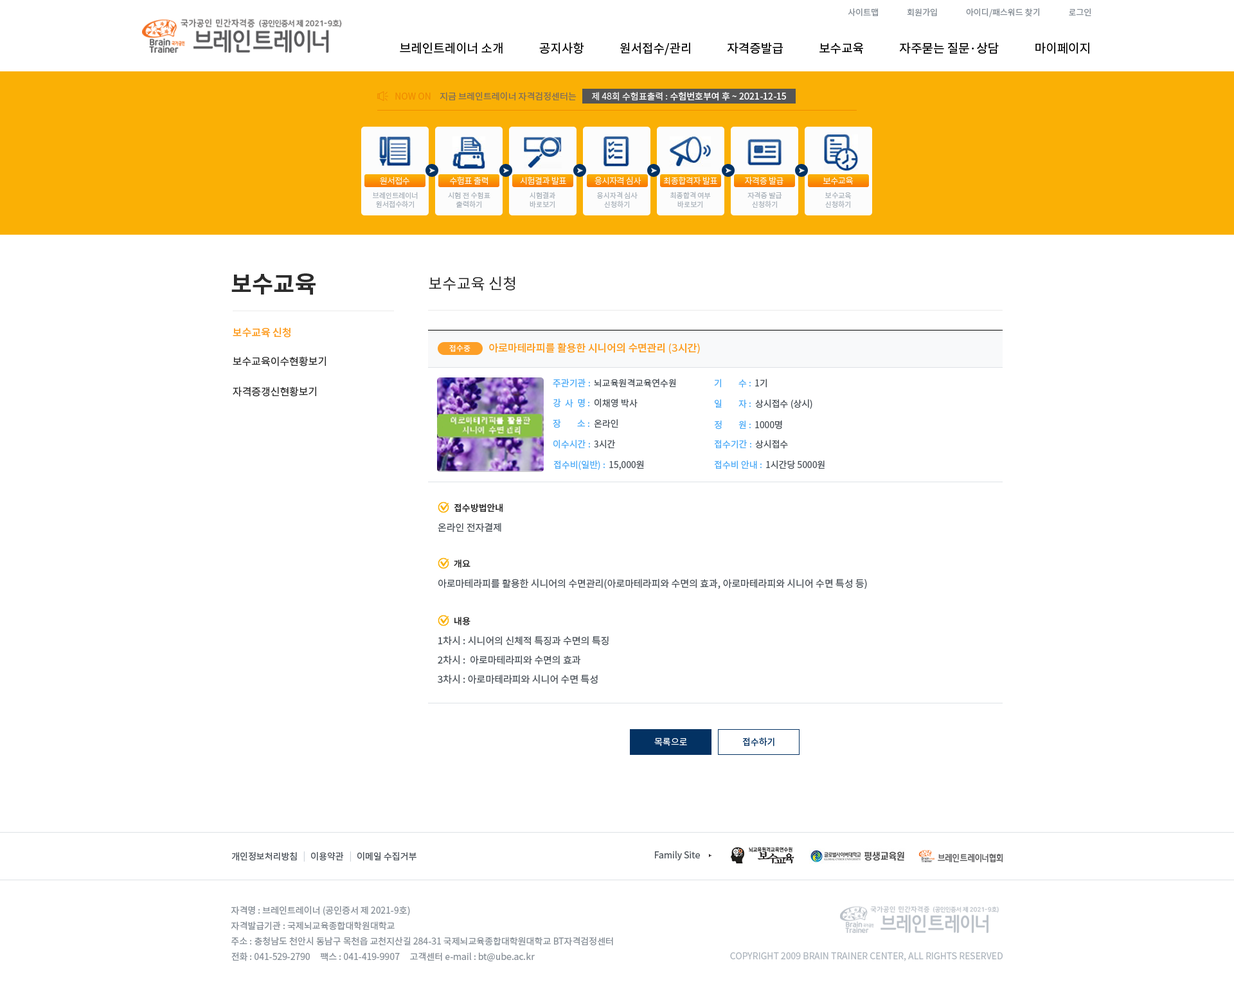
<style>
.page{position:relative;width:1234px;height:987px;background:#ffffff}
.page>*{position:absolute;margin:0}
.t1{font:8.4px "NotoSansCJKkr-Regular";letter-spacing:0.001em;color:#868e96}
.t2{font:12.2px "NotoSansCJKkr-Regular";color:#000000}
.t3{font:9px "NotoSansCJKkr-Regular";color:#f08c00}
.t4{font:9px "NotoSansCJKkr-Regular";color:#7c6d5d}
.t5{font:9px "NotoSansCJKkr-Medium";color:#f8f8f8}
.t6{font:9px "NotoSansCJKkr-Regular";color:#f8f8f8}
.t7{font:8.4px "NotoSansCJKkr-Light";letter-spacing:-0.025em;color:#fcfcfc}
.t8{font:7.1px/9px "NotoSansCJKkr-Regular";color:#adb5bd}
.t9{font:23.1px "NotoSansCJKkr-Bold";color:#2b2b2b}
.t10{font:15.4px "NotoSansCJKkr-Regular";color:#2b2b2b}
.t11{font:10.3px "NotoSansCJKkr-Medium";color:#fd9f27}
.t12{font:7.7px "NotoSansCJKkr-Regular";color:#ffffff}
.t13{font:10.3px "NotoSansCJKkr-Regular";color:#2b2b2b}
.t14{font:9px "NotoSansCJKkr-Regular";color:#4dabf7}
.t15{font:9px "NotoSansCJKkr-Regular";color:#495057}
.t16{font:9px "NotoSansCJKkr-Medium";color:#2b2b2b}
.t17{font:9.6px "NotoSansCJKkr-Regular";color:#495057}
.t18{font:9.6px/19.3px "NotoSansCJKkr-Regular";color:#495057}
.t19{font:9px "NotoSansCJKkr-Regular";color:#ffffff}
.t20{font:9px "NotoSansCJKkr-Regular";color:#033263}
.t21{font:9px "NotoSansCJKkr-Regular";color:#ced4da}
.t22{font:9px/15.4px "NotoSansCJKkr-Regular";color:#868e96}
.t23{font:9px "NotoSansCJKkr-Regular";color:#adb5bd}
</style>
<div class="page">
<p class="t1" style="left:848px;top:8px;width:244px;height:9px">사이트맵               회원가입               아이디/패스워드 찾기               로그인</p>
<p class="t2" style="left:400px;top:42px;width:690px;height:13px">브레인트레이너 소개             공지사항             원서접수/관리             자격증발급             보수교육             자주묻는 질문·상담             마이페이지</p>
<p class="t3" style="left:395px;top:93px;width:36px;height:7px">NOW ON</p>
<p class="t4" style="left:440px;top:92px;width:137px;height:9px">지금 브레인트레이너 자격검정센터는</p>
<p class="t5" style="left:592px;top:92px;width:194px;height:9px"><span class="t6">제 48회 수험표출력 : </span>수험번호부여 후 ~ 2021-12-15</p>
<p class="t7" style="left:380px;top:177px;width:30px;height:8px">원서접수</p>
<p class="t7" style="left:450px;top:176px;width:38px;height:9px">수험표 출력</p>
<p class="t7" style="left:520px;top:176px;width:46px;height:8px">시험결과 발표</p>
<p class="t7" style="left:595px;top:176px;width:47px;height:9px">응시자격 심사</p>
<p class="t7" style="left:663px;top:176px;width:54px;height:9px">최종합격자 발표</p>
<p class="t7" style="left:745px;top:176px;width:39px;height:9px">자격증 발급</p>
<p class="t7" style="left:823px;top:177px;width:30px;height:8px">보수교육</p>
<p class="t8" style="left:373px;top:192px;width:45px;height:16px;text-align:center">브레인트레이너<br>원서접수하기</p>
<p class="t8" style="left:448px;top:192px;width:43px;height:16px;text-align:center">시험 전 수험표<br>출력하기</p>
<p class="t8" style="left:530px;top:192px;width:25px;height:16px;text-align:center">시험결과<br>바로보기</p>
<p class="t8" style="left:597px;top:192px;width:41px;height:16px;text-align:center">응시자격 심사<br>신청하기</p>
<p class="t8" style="left:670px;top:192px;width:41px;height:16px;text-align:center">최종합격 여부<br>바로보기</p>
<p class="t8" style="left:748px;top:192px;width:34px;height:16px;text-align:center">자격증 발급<br>신청하기</p>
<p class="t8" style="left:825px;top:192px;width:27px;height:16px;text-align:center">보수교육<br>신청하기</p>
<p class="t9" style="left:231px;top:273px;width:85px;height:22px">보수교육</p>
<p class="t10" style="left:429px;top:276px;width:86px;height:15px">보수교육 신청</p>
<p class="t11" style="left:233px;top:327px;width:58px;height:11px">보수교육 신청</p>
<p class="t12" style="left:449px;top:345px;width:22px;height:7px">접수중</p>
<p class="t11" style="left:489px;top:343px;width:211px;height:11px">아로마테라피를 활용한 시니어의 수면관리 (3시간)</p>
<p class="t13" style="left:233px;top:356px;width:93px;height:10px">보수교육이수현황보기</p>
<p class="t13" style="left:233px;top:386px;width:83px;height:11px">자격증갱신현황보기</p>
<p class="t14" style="left:553px;top:379px;width:37px;height:9px">주관기관 :</p>
<p class="t15" style="left:594px;top:379px;width:82px;height:9px">뇌교육원격교육연수원</p>
<p class="t14" style="left:714px;top:379px;width:37px;height:9px">기        수 :</p>
<p class="t15" style="left:755px;top:379px;width:12px;height:9px">1기</p>
<p class="t14" style="left:554px;top:399px;width:36px;height:9px">강  사  명 :</p>
<p class="t15" style="left:595px;top:399px;width:43px;height:9px">이채영 박사</p>
<p class="t14" style="left:715px;top:399px;width:36px;height:9px">일        자 :</p>
<p class="t15" style="left:755px;top:399px;width:58px;height:10px">상시접수 (상시)</p>
<p class="t14" style="left:553px;top:419px;width:37px;height:9px">장        소 :</p>
<p class="t15" style="left:594px;top:419px;width:24px;height:9px">온라인</p>
<p class="t14" style="left:715px;top:420px;width:36px;height:9px">정        원 :</p>
<p class="t15" style="left:755px;top:420px;width:27px;height:9px">1000명</p>
<p class="t14" style="left:554px;top:440px;width:36px;height:9px">이수시간 :</p>
<p class="t15" style="left:594px;top:440px;width:21px;height:8px">3시간</p>
<p class="t14" style="left:714px;top:440px;width:38px;height:9px">접수기간 :</p>
<p class="t15" style="left:755px;top:440px;width:33px;height:9px">상시접수</p>
<p class="t14" style="left:554px;top:460px;width:51px;height:10px">접수비(일반) :</p>
<p class="t15" style="left:609px;top:460px;width:35px;height:10px">15,000원</p>
<p class="t14" style="left:714px;top:460px;width:48px;height:9px">접수비 안내 :</p>
<p class="t15" style="left:766px;top:460px;width:59px;height:9px">1시간당 5000원</p>
<p class="t16" style="left:455px;top:503px;width:48px;height:9px">접수방법안내</p>
<p class="t17" style="left:438px;top:523px;width:63px;height:9px">온라인 전자결제</p>
<p class="t16" style="left:454px;top:559px;width:17px;height:9px">개요</p>
<p class="t17" style="left:438px;top:579px;width:429px;height:10px">아로마테라피를 활용한 시니어의 수면관리(아로마테라피와 수면의 효과, 아로마테라피와 시니어 수면 특성 등)</p>
<p class="t16" style="left:455px;top:616px;width:16px;height:10px">내용</p>
<p class="t18" style="left:438px;top:636px;width:171px;height:48px">1차시 : 시니어의 신체적 특징과 수면의 특징<br>2차시 :  아로마테라피와 수면의 효과<br>3차시 : 아로마테라피와 시니어 수면 특성</p>
<p class="t19" style="left:654px;top:737px;width:33px;height:9px">목록으로</p>
<p class="t20" style="left:742px;top:737px;width:33px;height:9px">접수하기</p>
<p class="t15" style="left:231px;top:852px;width:66px;height:9px">개인정보처리방침</p>
<p class="t21" style="left:303px;top:851px;width:2px;height:10px">|</p>
<p class="t15" style="left:311px;top:852px;width:33px;height:9px">이용약관</p>
<p class="t21" style="left:350px;top:851px;width:1px;height:10px">|</p>
<p class="t15" style="left:357px;top:852px;width:60px;height:9px">이메일 수집거부</p>
<p class="t15" style="left:655px;top:851px;width:45px;height:9px">Family Site</p>
<p class="t22" style="left:231px;top:906px;width:382px;height:56px">자격명 : 브레인트레이너 (공인증서 제 2021-9호)<br>자격발급기관 : 국제뇌교육종합대학원대학교<br>주소 : 충청남도 천안시 동남구 목천읍 교천지산길 284-31 국제뇌교육종합대학원대학교 BT자격검정센터<br>전화 : 041-529-2790     팩스 : 041-419-9907     고객센터 e-mail : bt@ube.ac.kr</p>
<p class="t23" style="left:730px;top:952px;width:273px;height:9px">COPYRIGHT 2009 BRAIN TRAINER CENTER, ALL RIGHTS RESERVED</p>
</div>
